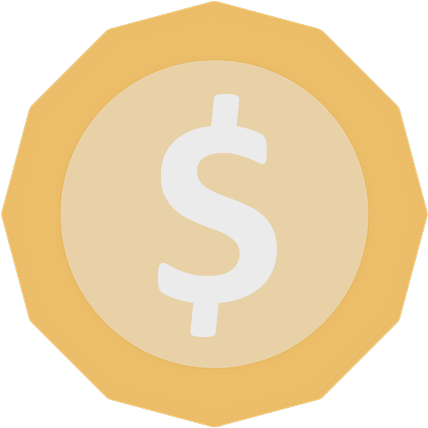
<style>
.page{position:relative;width:428px;height:428px;background:#e8d1a6}
.page>*{position:absolute;margin:0}
.t1{font:280px "Calibri-Bold";color:#ebebeb}
</style>
<div class="page">
<p class="t1" style="left:158px;top:94px;width:119px;height:243px">$</p>
</div>
